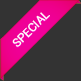
<style>
.page{position:relative;width:81px;height:81px;background:#333333}
.page>*{position:absolute;margin:0}
.t1{font:12px "Roboto-Regular";color:#ffffff;text-transform:uppercase}
</style>
<div class="page">
<p class="t1" style="left:12px;top:12px;width:38px;height:35px;rotate:-45deg">special</p>
</div>
